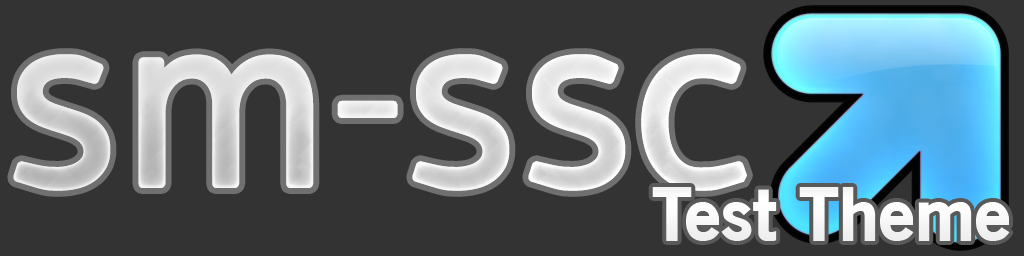
<style>
.page{position:relative;width:1024px;height:256px;background:#333333}
.page>*{position:absolute;margin:0}
.t1{font:256px "FranKleinBold";color:#e1e1e1}
.t2{font:72px "OldSansBlack";color:#ffffff}
</style>
<div class="page">
<p class="t1" style="left:13px;top:54px;width:734px;height:137px">sm-ssc</p>
<p class="t1" style="left:13px;top:54px;width:734px;height:137px">sm-ssc</p>
<p class="t2" style="left:652px;top:187px;width:358px;height:54px">Test Theme</p>
</div>
